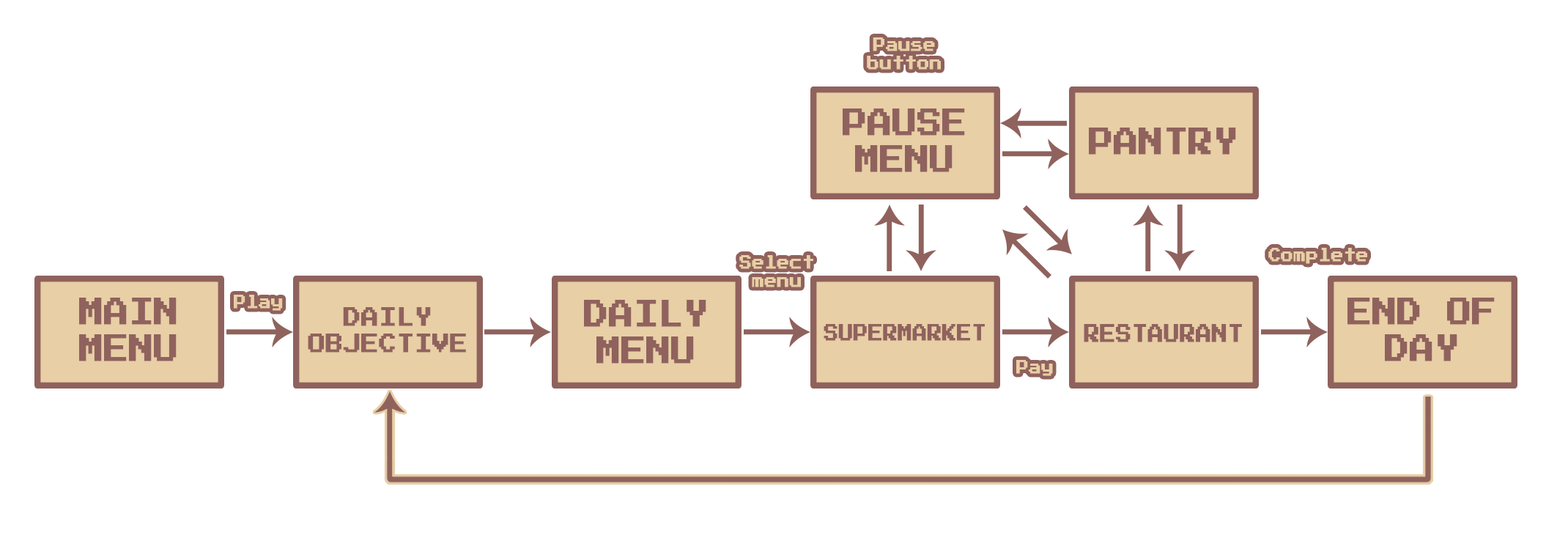
<style>
.page{position:relative;width:1568px;height:541px;background:#ffffff}
.page>*{position:absolute;margin:0}
.t1{font:15.4px "PressStart2P-Regular";letter-spacing:-0.01em;color:#e8cfa6;font-weight:bold;scale:0.8 1}
.t2{font:30.6px "PressStart2P-Regular";letter-spacing:-0.01em;color:#90625d;font-weight:bold;scale:0.8 1}
.t3{font:15.2px "PressStart2P-Regular";letter-spacing:-0.01em;color:#90625d;font-weight:bold;scale:0.8 1}
.t4{font:15.4px "PressStart2P-Regular";letter-spacing:-0.01em;color:#90625d;font-weight:bold;scale:0.8 1}
.t5{font:15.3px "PressStart2P-Regular";letter-spacing:-0.01em;color:#e8cfa6;font-weight:bold;scale:0.8 1}
.t6{font:17.4px "PressStart2P-Regular";letter-spacing:-0.01em;color:#90625d;font-weight:bold;scale:0.8 1}
.t7{font:21.8px "PressStart2P-Regular";letter-spacing:-0.01em;color:#90625d;font-weight:bold;scale:0.8 1}
.t8{font:26.2px "PressStart2P-Regular";letter-spacing:-0.01em;color:#90625d;font-weight:bold;scale:0.8 1}
.t9{font:18.1px "PressStart2P-Regular";letter-spacing:-0.01em;color:#90625d;font-weight:bold;scale:0.8 1}
.t10{font:13.2px "PressStart2P-Regular";letter-spacing:-0.01em;color:#90625d;font-weight:bold;scale:0.8 1}
.t11{font:19.6px "PressStart2P-Regular";letter-spacing:-0.01em;color:#90625d;font-weight:bold;scale:0.8 1}
.t12{font:13px "PressStart2P-Regular";letter-spacing:-0.01em;color:#90625d;font-weight:bold;scale:0.8 1}
</style>
<div class="page">
<p class="t1" style="left:867px;top:37px;width:74px;height:33px;text-align:center">Pause<br>button</p>
<p class="t2" style="left:843px;top:108px;width:122px;height:64px;text-align:center"><span class="t3"><br></span>PAUSE<br>MENU</p>
<p class="t2" style="left:1089px;top:127px;width:147px;height:28px"><span class="t4"><br><br></span>PANTRY</p>
<p class="t1" style="left:739px;top:255px;width:74px;height:32px;text-align:center">Select<br>menu</p>
<p class="t1" style="left:1268px;top:248px;width:99px;height:16px">Complete</p>
<p class="t2" style="left:79px;top:297px;width:98px;height:64px;text-align:center"><span class="t3"><br></span>MAIN<br>MENU</p>
<p class="t5" style="left:234px;top:295px;width:49px;height:16px">Play</p>
<p class="t2" style="left:584px;top:300px;width:122px;height:63px;text-align:center"><span class="t6"><br></span>DAILY<br>MENU</p>
<p class="t2" style="left:1347px;top:297px;width:148px;height:64px;text-align:center"><span class="t3"><br></span>END OF<br>DAY</p>
<p class="t7" style="left:308px;top:307px;width:158px;height:45px;text-align:center"><span class="t8"><br></span>DAILY<br>OBJECTIVE</p>
<p class="t9" style="left:824px;top:324px;width:161px;height:17px"><span class="t10"><br><br><br></span>SUPERMARKET</p>
<p class="t11" style="left:1084px;top:324px;width:158px;height:18px"><span class="t12"><br><br><br></span>RESTAURANT</p>
<p class="t1" style="left:1016px;top:360px;width:37px;height:16px">Pay</p>
</div>
